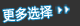
<style>
.page{position:relative;width:80px;height:26px;background:#333333}
.page>*{position:absolute;margin:0}
.t1{font:13.1px "MicrosoftYaHei";letter-spacing:0.05em;color:#ffffff;scale:0.91 1}
</style>
<div class="page">
<p class="t1" style="left:3px;top:5px;width:50px;height:18px;rotate:-5deg">更多选择</p>
</div>
